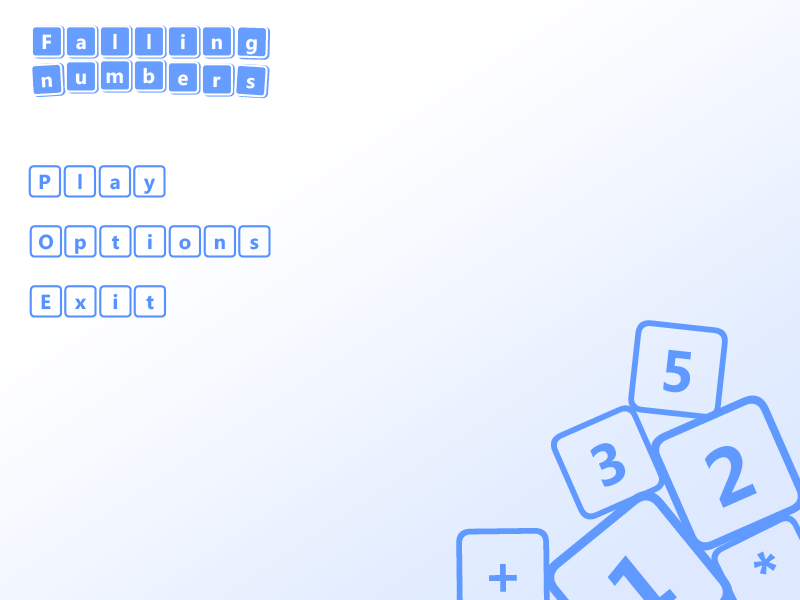
<style>
.page{position:relative;width:800px;height:600px}
.page>*{position:absolute;margin:0}
.t1{font:27.6px "SegoeKeycaps";color:#ffffff}
.t2{font:27.6px "SegoeKeycaps";color:#5692ff}
.t3{font:80px "SegoeKeycaps";color:#6099ff}
</style>
<div class="page">
<p class="t1" style="left:30px;top:25px;width:34px;height:33px">F</p>
<p class="t1" style="left:64px;top:25px;width:34px;height:33px">a</p>
<p class="t1" style="left:98px;top:25px;width:34px;height:33px">l</p>
<p class="t1" style="left:132px;top:25px;width:34px;height:33px">l</p>
<p class="t1" style="left:166px;top:25px;width:34px;height:33px">i</p>
<p class="t1" style="left:200px;top:25px;width:34px;height:33px">n</p>
<p class="t1" style="left:235px;top:25px;width:34px;height:34px;rotate:2deg">g</p>
<p class="t1" style="left:30px;top:62px;width:34px;height:35px;rotate:-3deg">n</p>
<p class="t1" style="left:64px;top:60px;width:34px;height:33px">u</p>
<p class="t1" style="left:98px;top:59px;width:34px;height:33px">m</p>
<p class="t1" style="left:132px;top:59px;width:34px;height:33px">b</p>
<p class="t1" style="left:166px;top:61px;width:34px;height:33px">e</p>
<p class="t1" style="left:200px;top:63px;width:34px;height:33px">r</p>
<p class="t1" style="left:234px;top:63px;width:34px;height:35px;rotate:4deg">s</p>
<p class="t2" style="left:28px;top:165px;width:138px;height:33px">Play</p>
<p class="t2" style="left:29px;top:225px;width:242px;height:33px">Options</p>
<p class="t2" style="left:29px;top:285px;width:138px;height:33px">Exit</p>
<p class="t3" style="left:628px;top:320px;width:100px;height:100px;rotate:6deg">5</p>
<p class="t3" style="left:551px;top:405px;width:114px;height:115px;rotate:-24deg">3</p>
</div>
